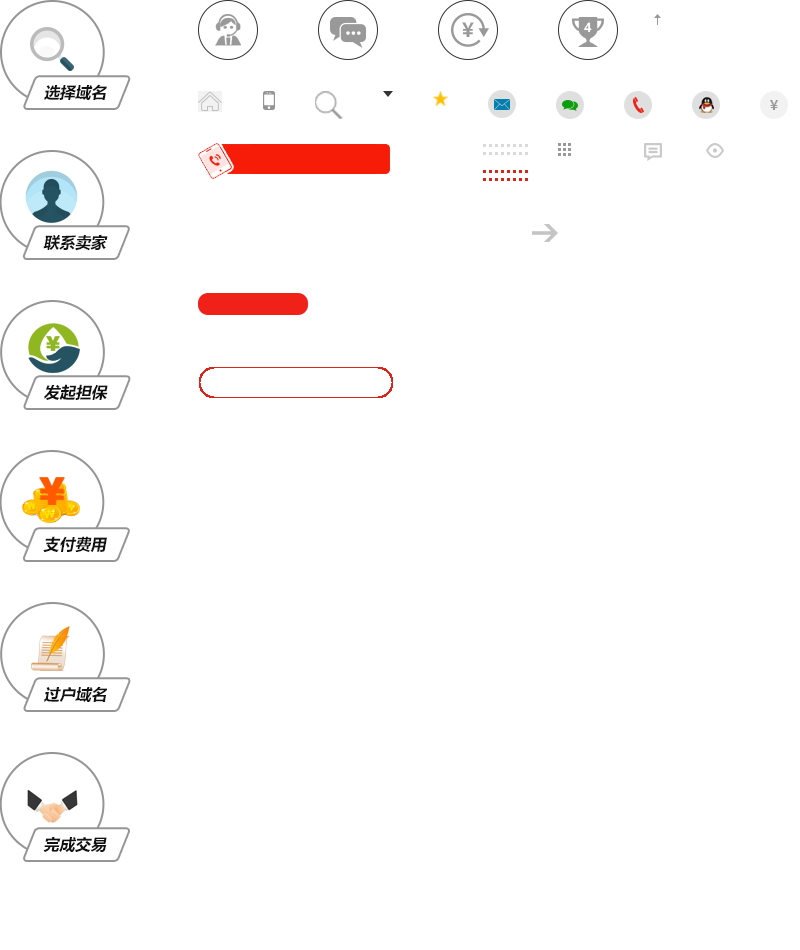
<style>
.page{position:relative;width:800px;height:950px;background:#ffffff}
.page>*{position:absolute;margin:0}
.t1{font:19.1px "MicrosoftYaHei-Bold";color:#999999}
.t2{font:12px "MicrosoftYaHei-Bold";color:#ffffff}
.t3{font:15.7px "MicrosoftYaHei-Bold";color:#111111;font-style:italic}
.t4{font:12.8px "MicrosoftYaHei-Bold";color:#999999}
</style>
<div class="page">
<p class="t1" style="left:462px;top:22px;width:12px;height:15px">￥</p>
<p class="t2" style="left:584px;top:22px;width:8px;height:11px">4</p>
<p class="t3" style="left:44px;top:84px;width:63px;height:16px">选择域名</p>
<p class="t4" style="left:770px;top:100px;width:8px;height:10px">￥</p>
<p class="t3" style="left:43px;top:234px;width:65px;height:17px">联系卖家</p>
<p class="t3" style="left:44px;top:384px;width:64px;height:16px">发起担保</p>
<p class="t3" style="left:43px;top:536px;width:64px;height:17px">支付费用</p>
<p class="t3" style="left:44px;top:686px;width:63px;height:16px">过户域名</p>
<p class="t3" style="left:43px;top:836px;width:64px;height:16px">完成交易</p>
</div>
